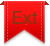
<style>
.page{position:relative;width:50px;height:46px;background:#ffffff}
.page>*{position:absolute;margin:0}
.t1{font:18px "HelveticaNeue";color:#863413}
</style>
<div class="page">
<p class="t1" style="left:13px;top:11px;width:25px;height:13px">Ext</p>
</div>
